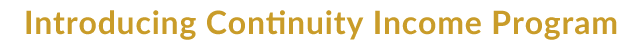
<style>
.page{position:relative;width:639px;height:47px;background:#ffffff}
.page>*{position:absolute;margin:0}
.t1{font:32px "Lato-Bold";letter-spacing:0.025em;color:#c99c29}
</style>
<div class="page">
<p class="t1" style="left:26px;top:10px;width:591px;height:30px">Introducing Continuity Income Program</p>
</div>
